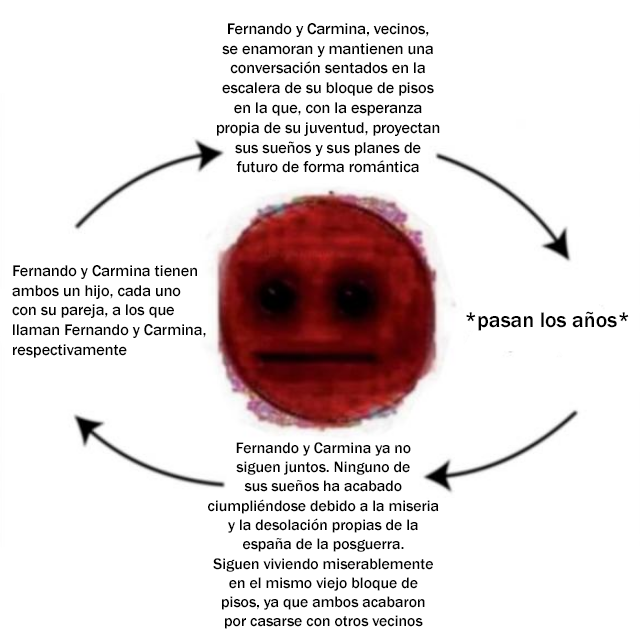
<style>
.page{position:relative;width:640px;height:640px;background:#ffffff}
.page>*{position:absolute;margin:0}
.t1{font:16.1px "FranklinGothic-Medium";color:#000000}
.t2{font:21.9px "FranklinGothic-Medium";color:#000000}
.t3{font:15.7px "FranklinGothic-Medium";color:#000000}
</style>
<div class="page">
<p class="t1" style="left:217px;top:23px;width:223px;height:150px;text-align:center">Fernando y Carmina, vecinos,<br>se enamoran y mantienen una<br>conversación sentados en la<br>escalera de su bloque de pisos<br>en la que, con la esperanza<br>propia de su juventud, proyectan<br>sus sueños y sus planes de<br>futuro de forma romántica</p>
<p class="t1" style="left:12px;top:265px;width:194px;height:93px">Fernando y Carmina tienen<br>ambos un hijo, cada uno<br>con su pareja, a los que<br>llaman Fernando y Carmina,<br>respectivamente</p>
<p class="t2" style="left:466px;top:311px;width:163px;height:20px">*pasan los años*</p>
<p class="t3" style="left:208px;top:442px;width:231px;height:187px;text-align:center">Fernando y Carmina ya no<br>siguen juntos. Ninguno de<br>sus sueños ha acabado<br>ciumpliéndose debido a la miseria<br>y la desolación propias de la<br>españa de la posguerra.<br>Siguen viviendo miserablemente<br>en el mismo viejo bloque de<br>pisos, ya que ambos acabaron<br>por casarse con otros vecinos</p>
</div>
